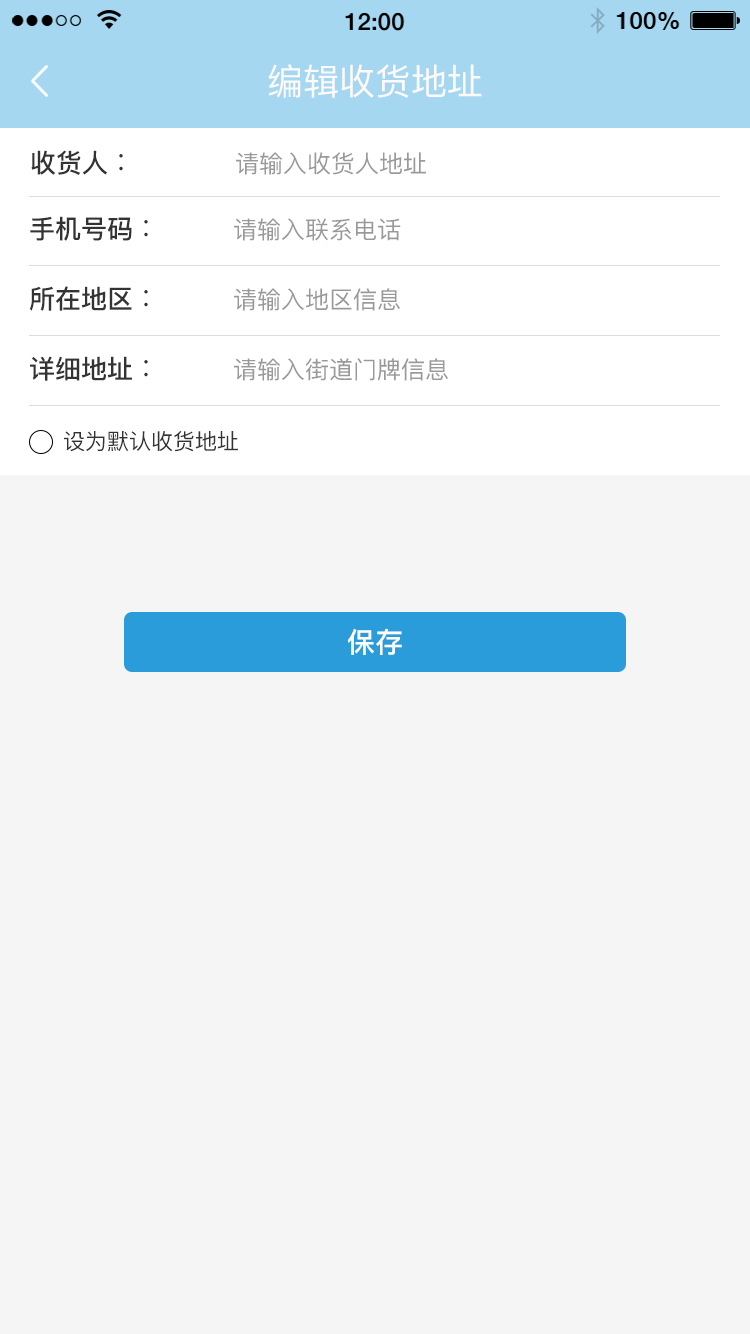
<style>
.page{position:relative;width:750px;height:1334px;background:#f5f5f5}
.page>*{position:absolute;margin:0}
.t1{font:36px "PingFangSC-Regular";color:#fefafa}
.t2{font:26px "PingFangSC-Medium";color:#333333}
.t3{font:26px "KozGoPr6N-Regular";color:#333333}
.t4{font:24px "PingFangSC-Regular";color:#999999}
.t5{font:22px "PingFangSC-Regular";color:#333333}
.t6{font:28px "PingFangSC-Medium";color:#ffffff}
</style>
<div class="page">
<p class="t1" style="left:268px;top:64px;width:214px;height:34px">编辑收货地址</p>
<p class="t2" style="left:31px;top:150px;width:92px;height:25px">收货人<span class="t3">：</span></p>
<p class="t4" style="left:236px;top:152px;width:190px;height:23px">请输入收货人地址</p>
<p class="t2" style="left:30px;top:216px;width:118px;height:25px">手机号码<span class="t3">：</span></p>
<p class="t4" style="left:234px;top:218px;width:167px;height:23px">请输入联系电话</p>
<p class="t2" style="left:29px;top:286px;width:119px;height:25px">所在地区<span class="t3">：</span></p>
<p class="t4" style="left:234px;top:288px;width:166px;height:23px">请输入地区信息</p>
<p class="t2" style="left:30px;top:356px;width:118px;height:25px">详细地址<span class="t3">：</span></p>
<p class="t4" style="left:234px;top:358px;width:214px;height:23px">请输入街道门牌信息</p>
<p class="t5" style="left:64px;top:431px;width:174px;height:21px">设为默认收货地址</p>
<p class="t6" style="left:347px;top:628px;width:55px;height:27px">保存</p>
</div>
